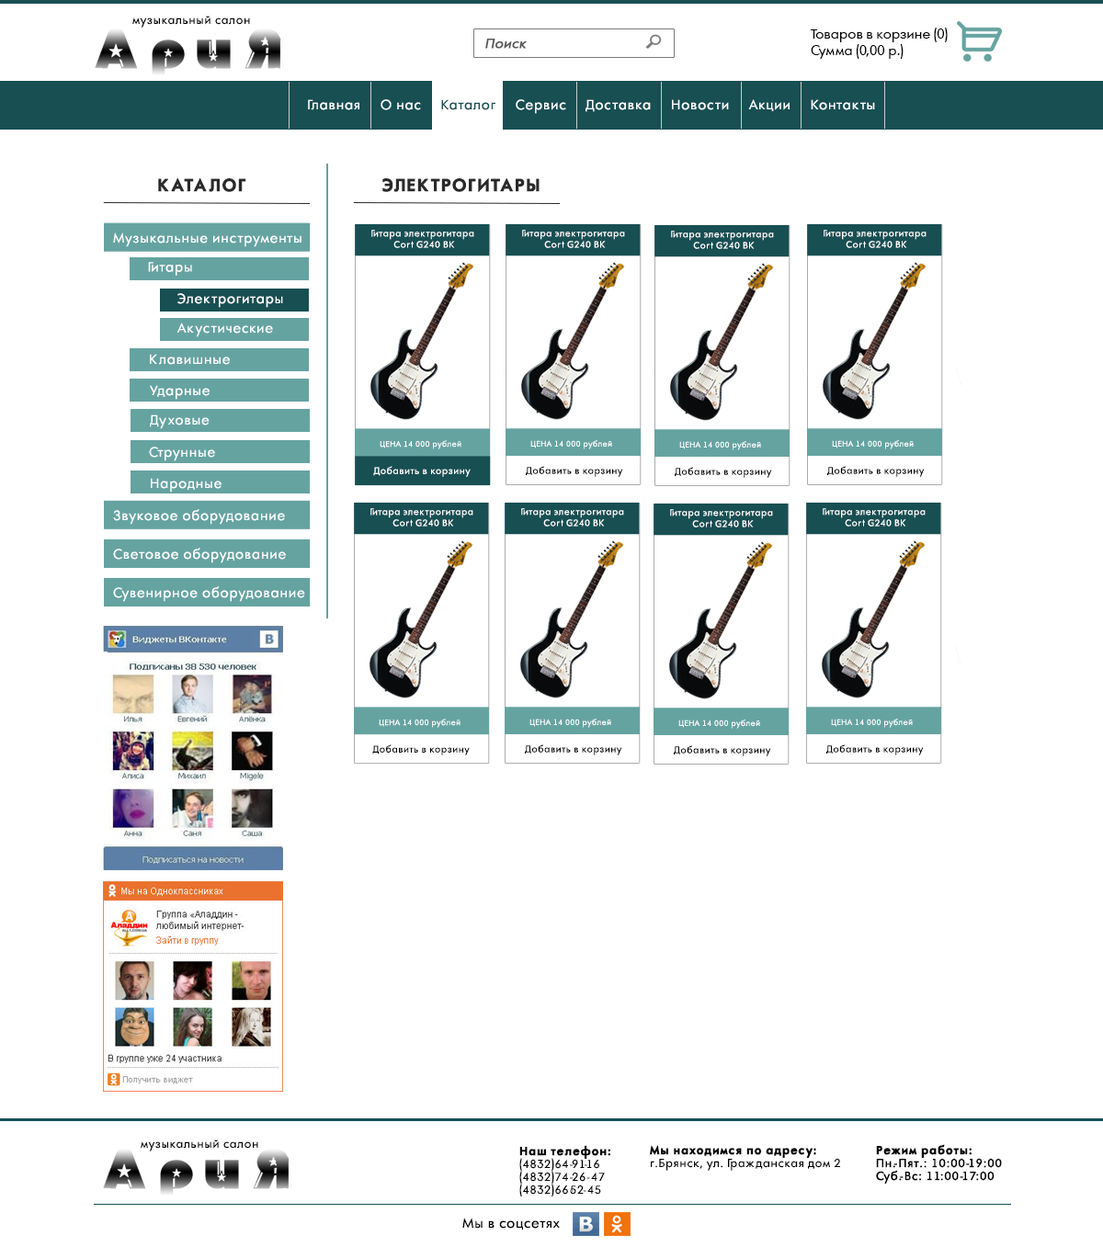
<style>
.page{position:relative;width:1103px;height:1247px;background:#ffffff}
.page>*{position:absolute;margin:0}
.t1{font:11px "AFuturaOrto";letter-spacing:0.05em;color:#000000}
.t2{font:12.9px/16.5px "AFuturaOrto";color:#000000}
.t3{font:12.9px "AFuturaOrto";color:#595959;font-weight:bold;font-style:italic}
.t4{font:12.9px "AFuturaOrto";letter-spacing:0.05em;color:#ffffff}
.t5{font:12.9px "AFuturaOrto";letter-spacing:0.05em;color:#174f53}
.t6{font:16.5px "AFuturaOrtoBold";letter-spacing:0.05em;color:#2b2a2a;text-transform:uppercase;font-weight:bold}
.t7{font:8.7px/11.2px "AFuturaOrto";letter-spacing:0.05em;color:#ffffff}
.t8{font:7.5px "AFuturaOrto";letter-spacing:0.05em;color:#ffffff}
.t9{font:9px "AFuturaOrto";letter-spacing:0.05em;color:#ffffff}
.t10{font:9px "AFuturaOrto";letter-spacing:0.05em;color:#000000}
.t11{font:11px/12.9px "AFuturaOrto";letter-spacing:0.05em;color:#000000}
.t12{font:11px/12.9px "AFuturaOrtoBold";letter-spacing:0.05em;color:#000000;font-weight:bold}
.t13{font:11px/12.9px "AFuturaOrto";letter-spacing:0.05em;color:#000000;font-weight:bold}
.t14{font:12.9px "AFuturaOrto";letter-spacing:0.05em;color:#000000}
</style>
<div class="page">
<p class="t1" style="left:132px;top:16px;width:118px;height:12px">музыкальный салон</p>
<p class="t2" style="left:811px;top:28px;width:137px;height:31px">Товаров в корзине (0)<br>Сумма (0,00 р.)</p>
<p class="t3" style="left:485px;top:39px;width:42px;height:10px">Поиск</p>
<p class="t4" style="left:308px;top:99px;width:567px;height:15px">Главная     О нас  <span class="t5">   Каталог </span>    Сервис     Доставка     Новости     Акции     Контакты</p>
<p class="t6" style="left:158px;top:178px;width:88px;height:14px">каталог</p>
<p class="t6" style="left:382px;top:178px;width:157px;height:14px">ЭЛЕКТРОГИТАРЫ</p>
<p class="t4" style="left:113px;top:233px;width:188px;height:14px">Музыкальные инструменты</p>
<p class="t7" style="left:371px;top:230px;width:103px;height:18px;text-align:center">Гитара электрогитара <br>Cort G240 BK</p>
<p class="t7" style="left:522px;top:230px;width:103px;height:18px;text-align:center">Гитара электрогитара <br>Cort G240 BK</p>
<p class="t7" style="left:671px;top:231px;width:103px;height:18px;text-align:center">Гитара электрогитара <br>Cort G240 BK</p>
<p class="t7" style="left:823px;top:230px;width:103px;height:18px;text-align:center">Гитара электрогитара <br>Cort G240 BK</p>
<p class="t4" style="left:148px;top:262px;width:44px;height:14px">Гитары</p>
<p class="t4" style="left:177px;top:293px;width:106px;height:15px">Электрогитары</p>
<p class="t4" style="left:176px;top:323px;width:97px;height:14px">Акустические</p>
<p class="t4" style="left:150px;top:354px;width:80px;height:11px">Клавишные</p>
<p class="t4" style="left:150px;top:385px;width:60px;height:15px">Ударные</p>
<p class="t4" style="left:150px;top:414px;width:60px;height:15px">Духовые</p>
<p class="t4" style="left:149px;top:447px;width:66px;height:14px">Струнные</p>
<p class="t8" style="left:380px;top:440px;width:81px;height:9px">ЦЕНА 14 000 рублей</p>
<p class="t8" style="left:530px;top:440px;width:82px;height:9px">ЦЕНА 14 000 рублей</p>
<p class="t8" style="left:679px;top:441px;width:82px;height:9px">ЦЕНА 14 000 рублей</p>
<p class="t8" style="left:832px;top:440px;width:82px;height:9px">ЦЕНА 14 000 рублей</p>
<p class="t9" style="left:373px;top:466px;width:98px;height:11px">Добавить в корзину</p>
<p class="t10" style="left:526px;top:466px;width:97px;height:11px">Добавить в корзину</p>
<p class="t10" style="left:675px;top:467px;width:97px;height:11px">Добавить в корзину</p>
<p class="t10" style="left:827px;top:466px;width:98px;height:11px">Добавить в корзину</p>
<p class="t4" style="left:151px;top:478px;width:70px;height:15px">Народные</p>
<p class="t4" style="left:113px;top:509px;width:172px;height:16px">Звуковое оборудование</p>
<p class="t7" style="left:370px;top:508px;width:103px;height:19px;text-align:center">Гитара электрогитара <br>Cort G240 BK</p>
<p class="t7" style="left:521px;top:508px;width:103px;height:19px;text-align:center">Гитара электрогитара <br>Cort G240 BK</p>
<p class="t7" style="left:670px;top:509px;width:103px;height:19px;text-align:center">Гитара электрогитара <br>Cort G240 BK</p>
<p class="t7" style="left:823px;top:508px;width:102px;height:19px;text-align:center">Гитара электрогитара <br>Cort G240 BK</p>
<p class="t4" style="left:113px;top:548px;width:173px;height:15px">Световое оборудование</p>
<p class="t4" style="left:113px;top:586px;width:192px;height:16px">Сувенирное оборудование</p>
<p class="t8" style="left:379px;top:719px;width:81px;height:9px">ЦЕНА 14 000 рублей</p>
<p class="t8" style="left:529px;top:719px;width:82px;height:9px">ЦЕНА 14 000 рублей</p>
<p class="t8" style="left:678px;top:720px;width:82px;height:9px">ЦЕНА 14 000 рублей</p>
<p class="t8" style="left:831px;top:719px;width:82px;height:9px">ЦЕНА 14 000 рублей</p>
<p class="t10" style="left:372px;top:744px;width:98px;height:11px">Добавить в корзину</p>
<p class="t10" style="left:525px;top:744px;width:97px;height:11px">Добавить в корзину</p>
<p class="t10" style="left:674px;top:745px;width:97px;height:11px">Добавить в корзину</p>
<p class="t10" style="left:826px;top:744px;width:98px;height:11px">Добавить в корзину</p>
<p class="t1" style="left:141px;top:1140px;width:117px;height:12px">музыкальный салон</p>
<p class="t11" style="left:519px;top:1145px;width:91px;height:52px"><span class="t12">Наш телефон:<br></span>(4832)64-91-16<br>(4832)74-26-47 <br>(4832)66-52-45</p>
<p class="t11" style="left:650px;top:1145px;width:190px;height:26px"><span class="t12">Мы находимся по адресу:<br></span>г.Брянск, ул. Гражданская дом 2</p>
<p class="t13" style="left:876px;top:1144px;width:126px;height:40px"><span class="t12">Режим работы:<br></span>Пн.-Пят.: 10:00-19:00<br>Суб.-Вс: 11:00-17:00</p>
<p class="t14" style="left:462px;top:1218px;width:98px;height:12px">Мы в соцсетях</p>
</div>
